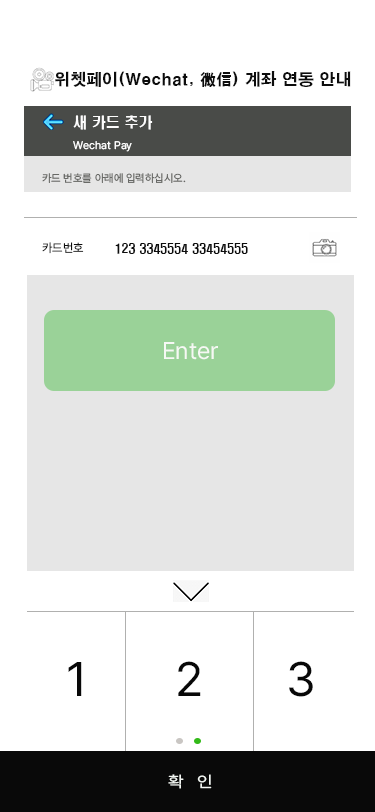
<style>
.page{position:relative;width:375px;height:812px;background:#ffffff}
.page>*{position:absolute;margin:0}
.t1{font:16px "H2gtrE";color:#0d0d0d}
.t2{font:14px "H2hdrM";color:#fdfdfd}
.t3{font:11px "Pretendard-Regular";color:#fdfdfd}
.t4{font:11px "Pretendard-Regular";color:#686966}
.t5{font:12px "Pretendard-Regular";color:#0d0d0d}
.t6{font:12px "H2hdrM";color:#0d0d0d}
.t7{font:24px "Pretendard-Regular";color:#f6f8f4}
.t8{font:48px "Pretendard-Regular";color:#080808}
.t9{font:15.6px "Pretendard-Regular";color:#f2f6f2;scale:1.15 1}
</style>
<div class="page">
<p class="t1" style="left:55px;top:71px;width:296px;height:16px">위쳇페이(Wechat, 微信) 계좌 연동 안내</p>
<p class="t2" style="left:73px;top:115px;width:80px;height:15px">새 카드 추가</p>
<p class="t3" style="left:73px;top:141px;width:59px;height:11px">Wechat Pay</p>
<p class="t4" style="left:42px;top:173px;width:144px;height:10px">카드 번호를 아래에 입력하십시오.</p>
<p class="t5" style="left:42px;top:242px;width:42px;height:12px">카드번호</p>
<p class="t6" style="left:115px;top:243px;width:133px;height:11px">123 3345554 33454555</p>
<p class="t7" style="left:164px;top:342px;width:54px;height:18px">Enter</p>
<p class="t8" style="left:68px;top:662px;width:14px;height:34px">1</p>
<p class="t8" style="left:178px;top:661px;width:23px;height:35px">2</p>
<p class="t8" style="left:289px;top:661px;width:24px;height:36px">3</p>
<p class="t9" style="left:168px;top:774px;width:44px;height:15px">확   인</p>
</div>
